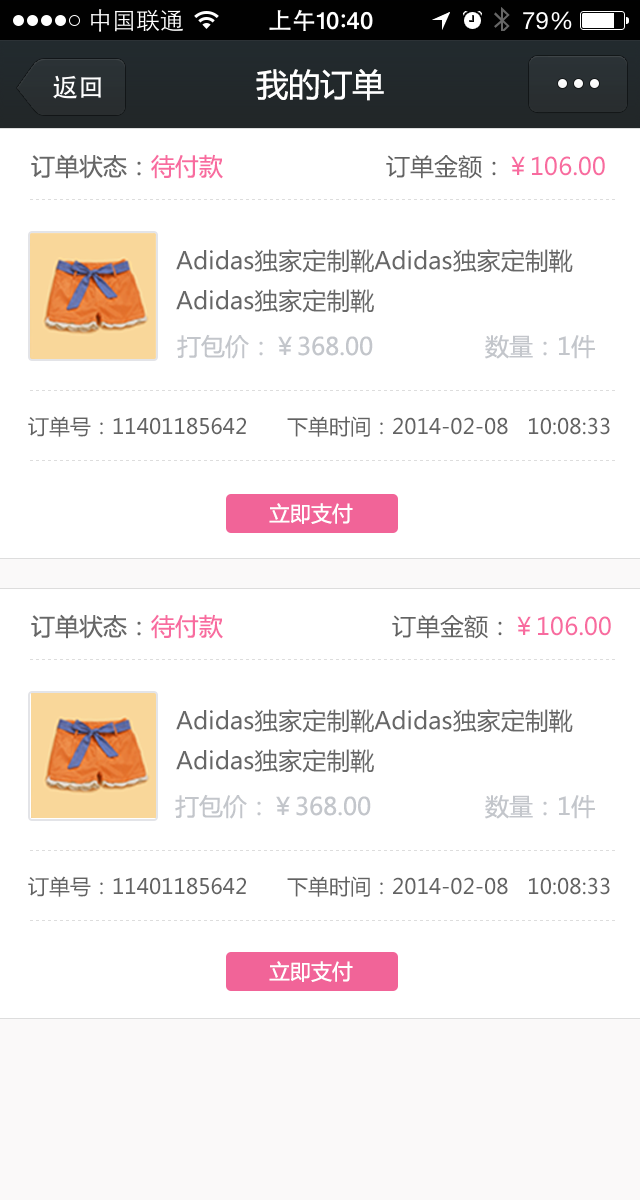
<style>
.page{position:relative;width:640px;height:1200px;background:#ffffff}
.page>*{position:absolute;margin:0}
.t1{font:32px "MicrosoftYaHei";color:#ffffff}
.t2{font:24px "MicrosoftYaHei";color:#676767}
.t3{font:24px "MicrosoftYaHei";color:#f86b9f}
.t4{font:24px "MicrosoftYaHei";color:#636363}
.t5{font:6px "SimSun";color:#dddddd}
.t6{font:24px/40px "MicrosoftYaHei";color:#676767}
.t7{font:24px "MicrosoftYaHei";color:#c3c6cb}
.t8{font:21px "MicrosoftYaHei";color:#636363}
.t9{font:21px "MicrosoftYaHei";color:#ffffff}
</style>
<div class="page">
<p class="t1" style="left:256px;top:69px;width:128px;height:32px">我的订单</p>
<p class="t2" style="left:31px;top:154px;width:192px;height:25px">订单状态：<span class="t3">待付款</span></p>
<p class="t3" style="left:386px;top:155px;width:219px;height:24px"><span class="t4">订单金额：</span>￥106.00</p>
<p class="t5" style="left:30px;top:199px;width:585px;height:1px">- - - - - - - - - - - - - - - - - - - - - - - - - - - - - - - - - - - - - - - - - - - - - - - - - - - - - - - - - - - - - - - - - - - - - - - - - - - - - - - - - - - - - - - - - - - - - - - - - -</p>
<p class="t6" style="left:176px;top:249px;width:397px;height:64px">Adidas独家定制靴Adidas独家定制靴Adidas独家定制靴</p>
<p class="t7" style="left:177px;top:334px;width:196px;height:25px">打包价：￥368.00</p>
<p class="t7" style="left:485px;top:335px;width:110px;height:24px">数量：1件</p>
<p class="t5" style="left:30px;top:390px;width:585px;height:1px">- - - - - - - - - - - - - - - - - - - - - - - - - - - - - - - - - - - - - - - - - - - - - - - - - - - - - - - - - - - - - - - - - - - - - - - - - - - - - - - - - - - - - - - - - - - - - - - - - -</p>
<p class="t8" style="left:28px;top:416px;width:218px;height:21px">订单号：11401185642</p>
<p class="t8" style="left:287px;top:416px;width:323px;height:21px">下单时间：2014-02-08   10:08:33</p>
<p class="t5" style="left:30px;top:460px;width:585px;height:1px">- - - - - - - - - - - - - - - - - - - - - - - - - - - - - - - - - - - - - - - - - - - - - - - - - - - - - - - - - - - - - - - - - - - - - - - - - - - - - - - - - - - - - - - - - - - - - - - - - -</p>
<p class="t9" style="left:269px;top:503px;width:84px;height:21px">立即支付</p>
<p class="t2" style="left:31px;top:614px;width:192px;height:25px">订单状态：<span class="t3">待付款</span></p>
<p class="t3" style="left:392px;top:615px;width:219px;height:24px"><span class="t4">订单金额：</span>￥106.00</p>
<p class="t5" style="left:30px;top:659px;width:585px;height:1px">- - - - - - - - - - - - - - - - - - - - - - - - - - - - - - - - - - - - - - - - - - - - - - - - - - - - - - - - - - - - - - - - - - - - - - - - - - - - - - - - - - - - - - - - - - - - - - - - - -</p>
<p class="t6" style="left:176px;top:709px;width:397px;height:64px">Adidas独家定制靴Adidas独家定制靴Adidas独家定制靴</p>
<p class="t7" style="left:175px;top:794px;width:196px;height:25px">打包价：￥368.00</p>
<p class="t7" style="left:485px;top:795px;width:110px;height:24px">数量：1件</p>
<p class="t5" style="left:30px;top:850px;width:585px;height:1px">- - - - - - - - - - - - - - - - - - - - - - - - - - - - - - - - - - - - - - - - - - - - - - - - - - - - - - - - - - - - - - - - - - - - - - - - - - - - - - - - - - - - - - - - - - - - - - - - - -</p>
<p class="t8" style="left:28px;top:876px;width:218px;height:21px">订单号：11401185642</p>
<p class="t8" style="left:287px;top:876px;width:323px;height:21px">下单时间：2014-02-08   10:08:33</p>
<p class="t5" style="left:30px;top:920px;width:585px;height:1px">- - - - - - - - - - - - - - - - - - - - - - - - - - - - - - - - - - - - - - - - - - - - - - - - - - - - - - - - - - - - - - - - - - - - - - - - - - - - - - - - - - - - - - - - - - - - - - - - - -</p>
<p class="t9" style="left:269px;top:961px;width:84px;height:21px">立即支付</p>
</div>
